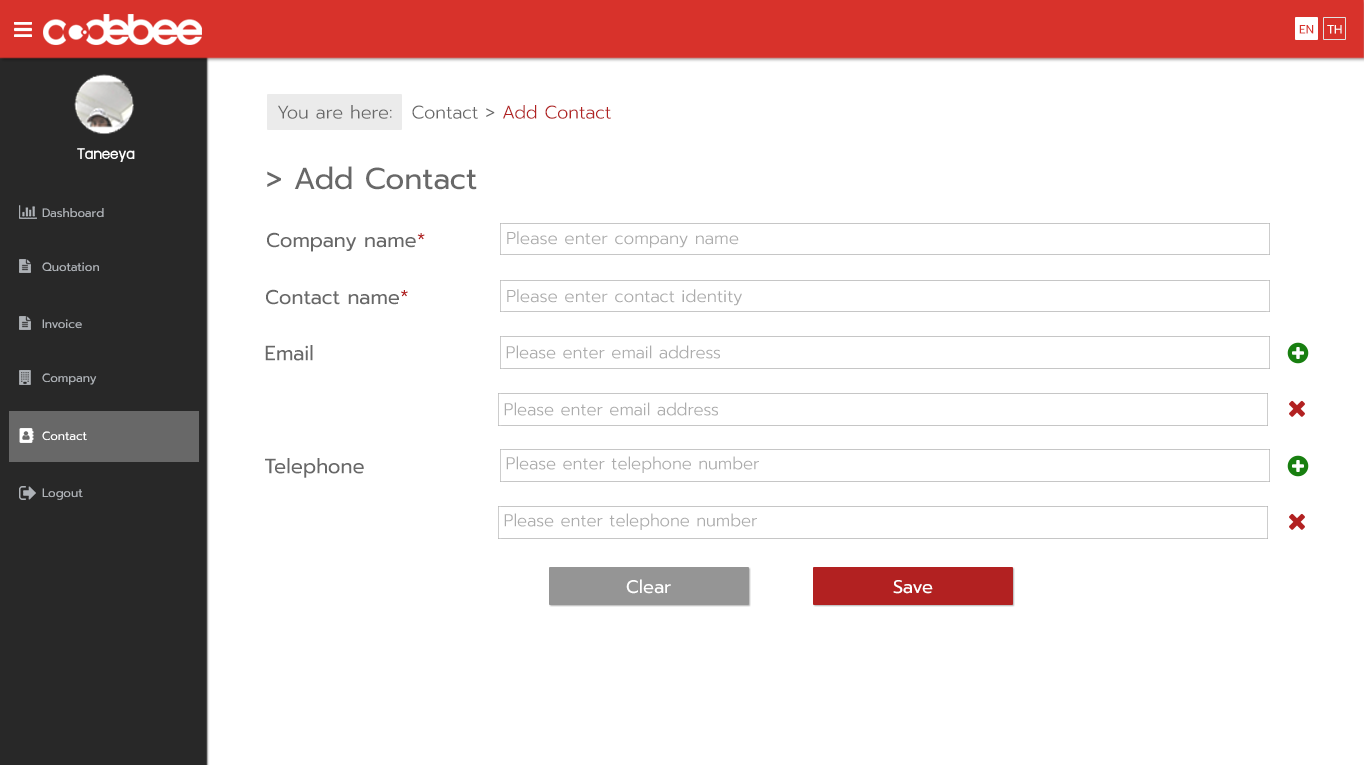
<style>
.page{position:relative;width:1364px;height:765px;background:#ffffff}
.page>*{position:absolute;margin:0}
.t1{font:12px "Prompt-Regular";color:#d8322b}
.t2{font:12px "Prompt-Regular";color:#ffffff}
.t3{font:18px "Prompt-Light";color:#686868}
.t4{font:18px "Prompt-Light";color:#b22121}
.t5{font:18px "supermarket";color:#ffffff}
.t6{font:30px "Prompt-Regular";color:#686868}
.t7{font:12px "Prompt-Regular";color:#aeb2b7}
.t8{font:20px "Prompt-Regular";color:#686868}
.t9{font:20px "Prompt-Regular";color:#b22121}
.t10{font:17px "Prompt-Light";color:#acacac}
.t11{font:20.5px "Prompt-Regular";color:#686868}
.t12{font:18px "Prompt-Regular";color:#ffffff}
</style>
<div class="page">
<p class="t1" style="left:1299px;top:25px;width:15px;height:9px">EN</p>
<p class="t2" style="left:1327px;top:25px;width:15px;height:9px">TH</p>
<p class="t3" style="left:278px;top:105px;width:114px;height:14px">You are here:</p>
<p class="t4" style="left:412px;top:105px;width:199px;height:14px"><span class="t3">Contact &gt; </span>Add Contact</p>
<p class="t5" style="left:77px;top:148px;width:58px;height:14px">Taneeya</p>
<p class="t6" style="left:267px;top:166px;width:210px;height:24px">&gt; Add Contact</p>
<p class="t7" style="left:42px;top:208px;width:62px;height:10px">Dashboard</p>
<p class="t8" style="left:267px;top:232px;width:158px;height:20px">Company name<span class="t9">*</span></p>
<p class="t10" style="left:507px;top:231px;width:232px;height:17px">Please enter company name</p>
<p class="t7" style="left:42px;top:262px;width:57px;height:10px">Quotation</p>
<p class="t8" style="left:266px;top:289px;width:142px;height:16px">Contact name<span class="t9">*</span></p>
<p class="t10" style="left:507px;top:289px;width:235px;height:17px">Please enter contact identity</p>
<p class="t7" style="left:42px;top:319px;width:40px;height:10px">Invoice</p>
<p class="t11" style="left:265px;top:345px;width:48px;height:16px">Email</p>
<p class="t10" style="left:506px;top:345px;width:214px;height:14px">Please enter email address</p>
<p class="t7" style="left:42px;top:373px;width:55px;height:12px">Company</p>
<p class="t10" style="left:504px;top:402px;width:214px;height:14px">Please enter email address</p>
<p class="t2" style="left:42px;top:431px;width:45px;height:10px">Contact</p>
<p class="t11" style="left:265px;top:458px;width:99px;height:20px">Telephone</p>
<p class="t10" style="left:506px;top:456px;width:253px;height:17px">Please enter telephone number</p>
<p class="t7" style="left:42px;top:488px;width:41px;height:12px">Logout</p>
<p class="t10" style="left:504px;top:513px;width:253px;height:17px">Please enter telephone number</p>
<p class="t12" style="left:626px;top:579px;width:45px;height:15px">Clear</p>
<p class="t12" style="left:893px;top:580px;width:40px;height:14px">Save</p>
</div>
